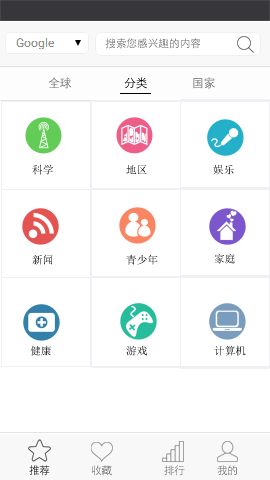
<style>
.page{position:relative;width:270px;height:480px;background:#ffffff}
.page>*{position:absolute;margin:0}
.t1{font:10.7px "STXihei";color:#676767}
.t2{font:12px "STXihei";letter-spacing:-0.04em}
.t3{font:12px "STXihei";letter-spacing:-0.04em;color:#676767}
.t4{font:10.7px "SimSun"}
.t5{font:10.7px "SimSun";color:#000000}
.t6{font:10.7px "STXihei";letter-spacing:-0.04em}
.t7{font:10.7px "STXihei";letter-spacing:-0.04em;color:#676767}
</style>
<div class="page">
<p class="t1" style="left:105px;top:38px;width:96px;height:11px">搜索您感兴趣的内容</p>
<p class="t2" style="left:48px;top:77px;width:23px;height:12px">全球</p>
<p class="t2" style="left:124px;top:77px;width:23px;height:12px">分类</p>
<p class="t3" style="left:193px;top:77px;width:22px;height:12px">国家</p>
<p class="t4" style="left:32px;top:164px;width:21px;height:11px">科学</p>
<p class="t4" style="left:126px;top:164px;width:21px;height:11px">地区</p>
<p class="t4" style="left:213px;top:164px;width:21px;height:11px">娱乐</p>
<p class="t4" style="left:32px;top:254px;width:21px;height:11px">新闻</p>
<p class="t4" style="left:126px;top:254px;width:32px;height:11px">青少年</p>
<p class="t4" style="left:214px;top:253px;width:21px;height:11px">家庭</p>
<p class="t4" style="left:30px;top:345px;width:21px;height:11px">健康</p>
<p class="t4" style="left:126px;top:345px;width:21px;height:11px">游戏</p>
<p class="t5" style="left:214px;top:345px;width:32px;height:11px">计算机</p>
<p class="t6" style="left:29px;top:465px;width:21px;height:11px">推荐</p>
<p class="t7" style="left:91px;top:465px;width:21px;height:11px">收藏</p>
<p class="t6" style="left:164px;top:465px;width:21px;height:11px">排行</p>
<p class="t6" style="left:217px;top:465px;width:20px;height:11px">我的</p>
</div>
